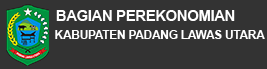
<style>
.page{position:relative;width:267px;height:69px;background:#333333}
.page>*{position:absolute;margin:0}
.t1{font:14.9px "Arial-BoldMT";letter-spacing:-0.025em;color:#ffffff}
.t2{font:12px "Arial-BoldMT";letter-spacing:-0.025em;color:#ffffff}
</style>
<div class="page">
<p class="t1" style="left:56px;top:10px;width:179px;height:11px">BAGIAN PEREKONOMIAN</p>
<p class="t2" style="left:55px;top:30px;width:210px;height:9px">KABUPATEN PADANG LAWAS UTARA</p>
</div>
